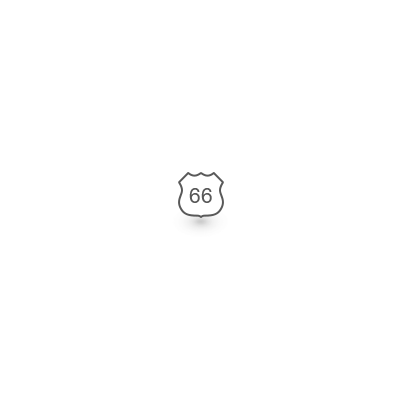
<style>
.page{position:relative;width:400px;height:400px;background:#ffffff}
.page>*{position:absolute;margin:0}
.t1{font:21px "ArialMT";color:#595959}
</style>
<div class="page">
<p class="t1" style="left:189px;top:188px;width:23px;height:15px">66</p>
</div>
